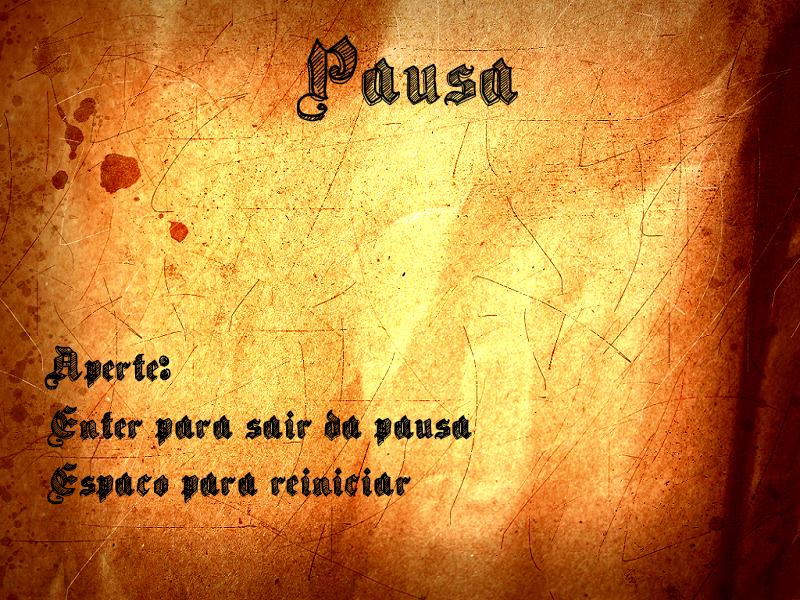
<style>
.page{position:relative;width:800px;height:600px}
.page>*{position:absolute;margin:0}
.t1{font:96px "SketchGothicSchool";color:#000000}
.t2{font:48px "SketchGothicSchool";color:#000000}
</style>
<div class="page">
<p class="t1" style="left:296px;top:35px;width:223px;height:87px">Pausa</p>
<p class="t2" style="left:44px;top:345px;width:428px;height:160px">Aperte: <br>Enter para sair da pausa<br>Espaco para reiniciar</p>
</div>
